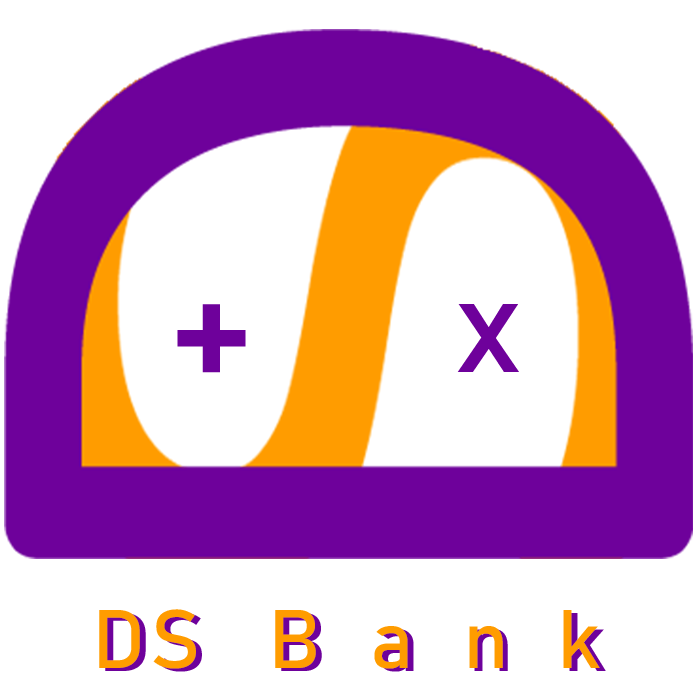
<style>
.page{position:relative;width:700px;height:700px;background:#ffffff}
.page>*{position:absolute;margin:0}
.t1{font:170.6px "Bahnschrift";color:#6e019b}
.t2{font:133.7px "Bahnschrift";color:#6e019b}
.t3{font:81.6px "Bahnschrift";letter-spacing:0.6em;color:#ff9c00}
.t4{font:81.6px "Bahnschrift";letter-spacing:0.06em;color:#ff9c00}
.t5{font:81.6px "Bahnschrift";letter-spacing:0.6em}
.t6{font:81.6px "Bahnschrift";letter-spacing:0.06em}
</style>
<div class="page">
<p class="t1" style="left:177px;top:304px;width:69px;height:69px">+</p>
<p class="t2" style="left:457px;top:304px;width:62px;height:68px">x</p>
<p class="t3" style="left:99px;top:609px;width:501px;height:60px"><span class="t4">DS</span> Bank</p>
<p class="t5" style="left:105px;top:612px;width:501px;height:60px"><span class="t6">DS</span> Bank</p>
</div>
